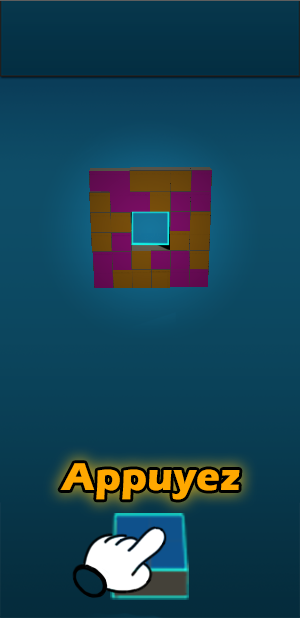
<style>
.page{position:relative;width:300px;height:618px}
.page>*{position:absolute;margin:0}
.t1{font:40px "ErasITC-Bold";color:#ffa800}
</style>
<div class="page">
<p class="t1" style="left:60px;top:463px;width:180px;height:37px">Appuyez</p>
</div>
